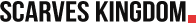
<style>
.page{position:relative;width:196px;height:23px;background:#ffffff}
.page>*{position:absolute;margin:0}
.t1{font:28.8px "BebasNeue";color:#100f0f;scale:1.15 1}
</style>
<div class="page">
<p class="t1" style="left:0px;top:1px;width:186px;height:21px">SCARVES KINGDOM</p>
</div>
